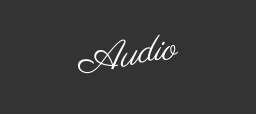
<style>
.page{position:relative;width:256px;height:114px;background:#333333}
.page>*{position:absolute;margin:0}
.t1{font:38.6px "Parisienne-Regular";color:#ffffff}
</style>
<div class="page">
<p class="t1" style="left:78px;top:34px;width:100px;height:40px">Audio</p>
</div>
